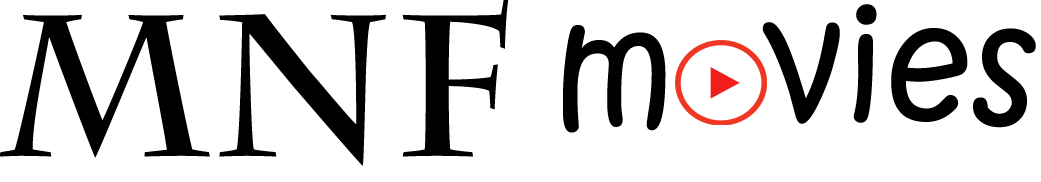
<style>
.page{position:relative;width:1041px;height:182px;background:#ffffff}
.page>*{position:absolute;margin:0}
.t1{font:200px "CharlemagneStd-Bold";color:#000000}
.t2{font:150px "KristenITC-Regular";color:#000000}
</style>
<div class="page">
<p class="t1" style="left:0px;top:0px;width:509px;height:166px">MNF</p>
<p class="t2" style="left:563px;top:4px;width:473px;height:129px">m  vies</p>
</div>
